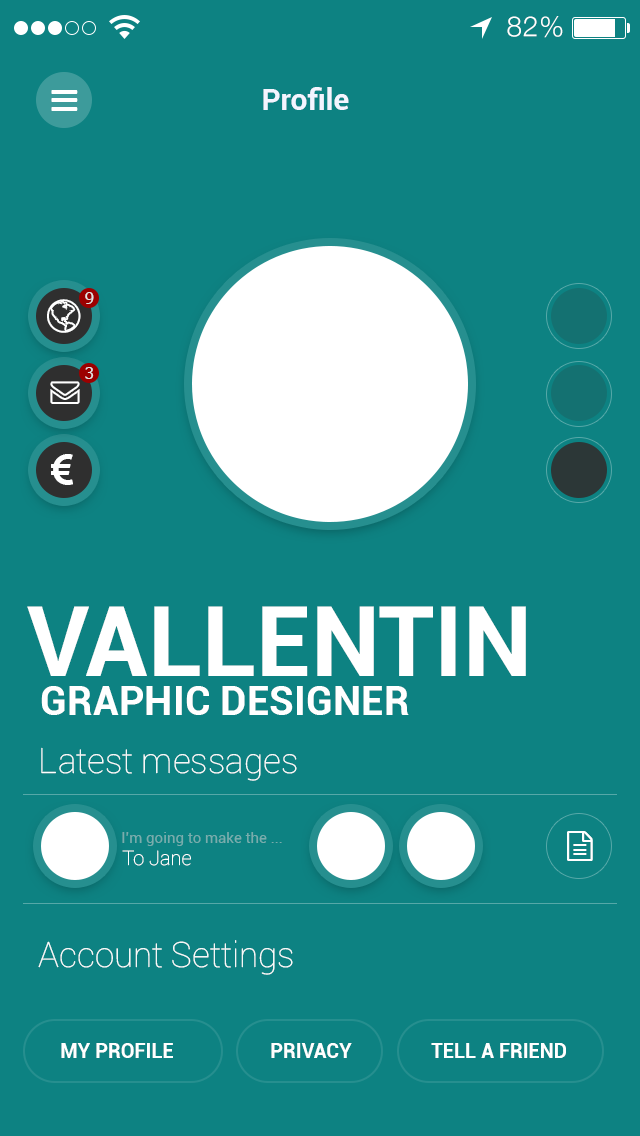
<style>
.page{position:relative;width:640px;height:1136px;background:#0d8282}
.page>*{position:absolute;margin:0}
.t1{font:28px "HelveticaNeue-Light";letter-spacing:0.025em;color:#ffffff}
.t2{font:30px "Roboto-Bold";color:#f4f5ff}
.t3{font:17px "Tahoma";color:#e3e3e3}
.t4{font:97px "Roboto-Bold";color:#ffffff;text-transform:uppercase}
.t5{font:40px "Roboto-Bold";color:#ffffff;text-transform:uppercase}
.t6{font:35px "Roboto-Thin";color:#ffffff}
.t7{font:15px "Roboto-Regular";color:#78adad}
.t8{font:20px "Roboto-Thin";color:#ffffff}
.t9{font:20px "Roboto-Bold";color:#ffffff;text-transform:uppercase}
</style>
<div class="page">
<p class="t1" style="left:507px;top:16px;width:56px;height:22px">82%</p>
<p class="t2" style="left:263px;top:87px;width:86px;height:23px">Profile</p>
<p class="t3" style="left:85px;top:292px;width:9px;height:12px">9</p>
<p class="t3" style="left:85px;top:367px;width:9px;height:12px">3</p>
<p class="t4" style="left:27px;top:606px;width:499px;height:70px">Vallentin</p>
<p class="t5" style="left:41px;top:686px;width:368px;height:29px">graphic designer</p>
<p class="t6" style="left:41px;top:747px;width:256px;height:34px">Latest messages</p>
<p class="t7" style="left:122px;top:832px;width:160px;height:14px">I’m going to make the ...</p>
<p class="t8" style="left:122px;top:850px;width:69px;height:16px">To Jane</p>
<p class="t6" style="left:38px;top:940px;width:255px;height:35px">Account Settings</p>
<p class="t9" style="left:61px;top:1043px;width:112px;height:15px">My PROFILE</p>
<p class="t9" style="left:271px;top:1043px;width:81px;height:15px">PRIVACy</p>
<p class="t9" style="left:431px;top:1043px;width:135px;height:15px">Tell a friend</p>
</div>
